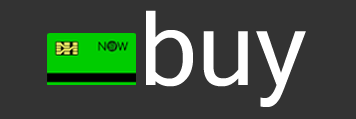
<style>
.page{position:relative;width:356px;height:119px;background:#333333}
.page>*{position:absolute;margin:0}
.t1{font:103.8px "MicrosoftSansSerif";color:#ffffff}
</style>
<div class="page">
<p class="t1" style="left:146px;top:10px;width:160px;height:97px">buy</p>
</div>
